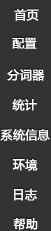
<style>
.page{position:relative;width:51px;height:231px;background:#333333}
.page>*{position:absolute;margin:0}
.t1{font:12px "MicrosoftYaHei";color:#ffffff;font-weight:bold}
</style>
<div class="page">
<p class="t1" style="left:14px;top:8px;width:25px;height:13px">首页</p>
<p class="t1" style="left:12px;top:37px;width:25px;height:12px">配置</p>
<p class="t1" style="left:7px;top:69px;width:38px;height:12px">分词器</p>
<p class="t1" style="left:12px;top:98px;width:25px;height:13px">统计</p>
<p class="t1" style="left:0px;top:128px;width:50px;height:13px">系统信息</p>
<p class="t1" style="left:12px;top:159px;width:26px;height:12px">环境</p>
<p class="t1" style="left:14px;top:188px;width:23px;height:13px">日志</p>
<p class="t1" style="left:13px;top:218px;width:25px;height:12px">帮助</p>
</div>
